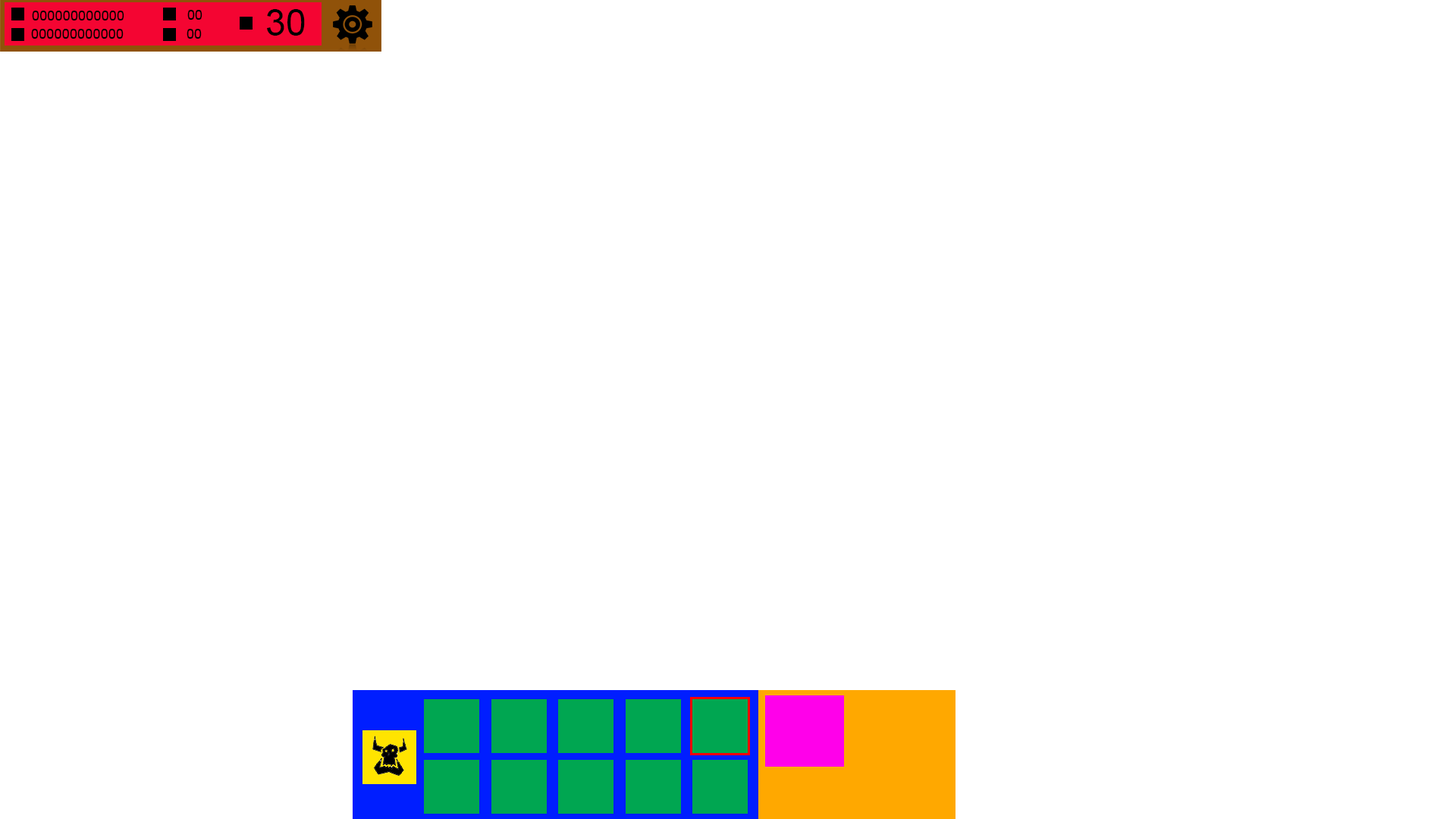
<style>
.page{position:relative;width:1456px;height:819px;background:#ffffff}
.page>*{position:absolute;margin:0}
.t1{font:13.6px "ArialMT";letter-spacing:0.01em;color:#000000}
.t2{font:36.4px "ArialMT";letter-spacing:0.01em;color:#000000}
</style>
<div class="page">
<p class="t1" style="left:32px;top:11px;width:92px;height:9px">000000000000</p>
<p class="t1" style="left:187px;top:10px;width:15px;height:10px">00</p>
<p class="t2" style="left:267px;top:9px;width:38px;height:27px">30</p>
<p class="t1" style="left:31px;top:29px;width:93px;height:10px">000000000000</p>
<p class="t1" style="left:187px;top:29px;width:15px;height:10px">00</p>
</div>
